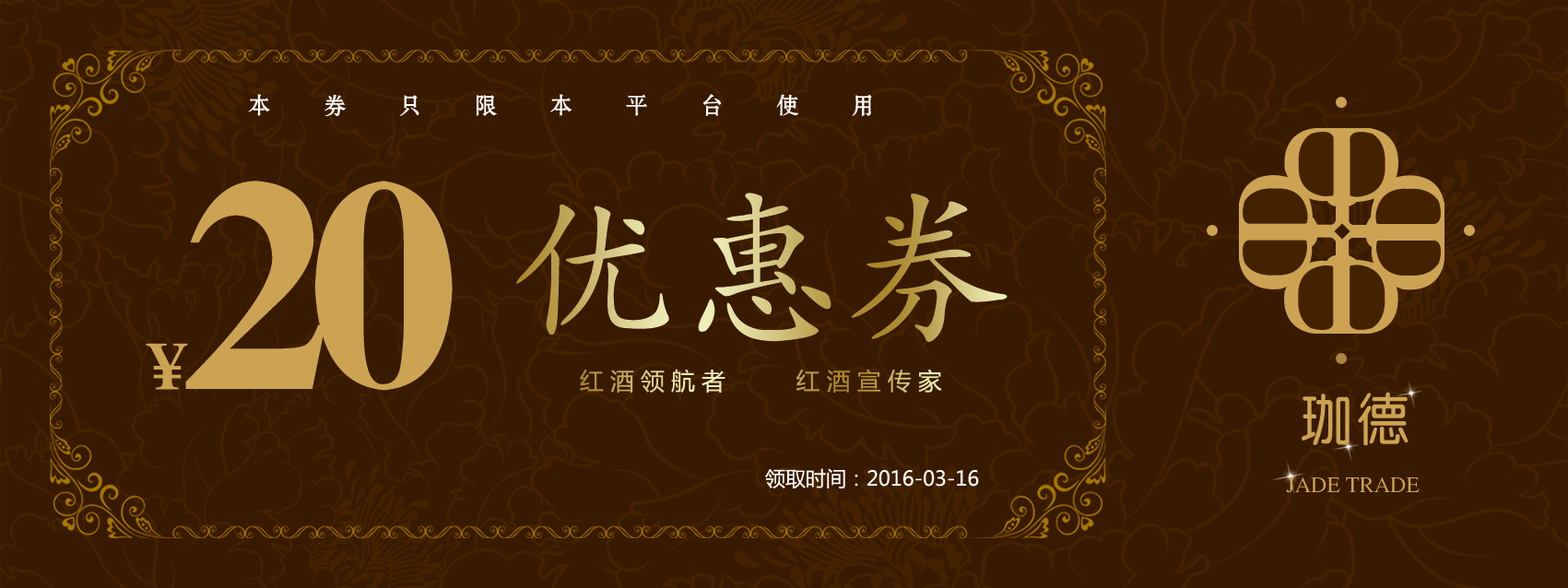
<style>
.page{position:relative;width:1568px;height:588px;background:#381a00}
.page>*{position:absolute;margin:0}
.t1{font:22.9px "FZSHJW--GB1-0";letter-spacing:2.3em;color:#ffffff}
.t2{font:302.4px "FZXBSFW--GB1-0";letter-spacing:-0.08em;color:#cca352}
.t3{font:165.9px "FZKTJW--GB1-0"}
.t4{font:67.5px "FZXBSFW--GB1-0";letter-spacing:-0.08em;color:#cca352}
.t5{font:23.8px "MicrosoftYaHei";letter-spacing:0.28em}
.t6{font:58px "CTZhongYuanSJ";color:#cca352}
.t7{font:20.3px "MicrosoftYaHei";color:#ffffff}
.t8{font:22.1px "CTWeiBeiSJ";color:#cca352}
</style>
<div class="page">
<p class="t1" style="left:248px;top:94px;width:624px;height:22px">本券只限本平台使用</p>
<p class="t2" style="left:185px;top:181px;width:268px;height:210px">20</p>
<p class="t3" style="left:516px;top:193px;width:492px;height:149px">优惠券</p>
<p class="t4" style="left:146px;top:343px;width:42px;height:47px">￥</p>
<p class="t5" style="left:580px;top:369px;width:362px;height:25px">红酒领航者     红酒宣传家</p>
<p class="t6" style="left:1302px;top:392px;width:107px;height:54px">珈德</p>
<p class="t7" style="left:765px;top:468px;width:214px;height:21px">领取时间：2016-03-16</p>
<p class="t8" style="left:1286px;top:477px;width:134px;height:16px">JADE TRADE</p>
</div>
